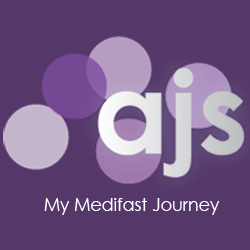
<style>
.page{position:relative;width:250px;height:250px;background:#553769}
.page>*{position:absolute;margin:0}
.t1{font:17.5px "CenturyGothic";color:#ffffff}
</style>
<div class="page">
<p class="t1" style="left:44px;top:198px;width:176px;height:17px">My Medifast Journey</p>
</div>
